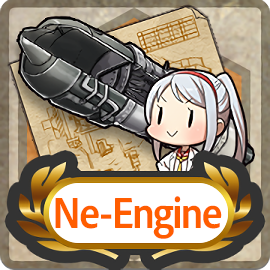
<style>
.page{position:relative;width:270px;height:270px}
.page>*{position:absolute;margin:0}
.t1{font:45px "AdobeClean-Bold";letter-spacing:-0.04em;color:#ff5d00;scale:0.9 1}
</style>
<div class="page">
<p class="t1" style="left:55px;top:196px;width:167px;height:43px">Ne-Engine</p>
</div>
